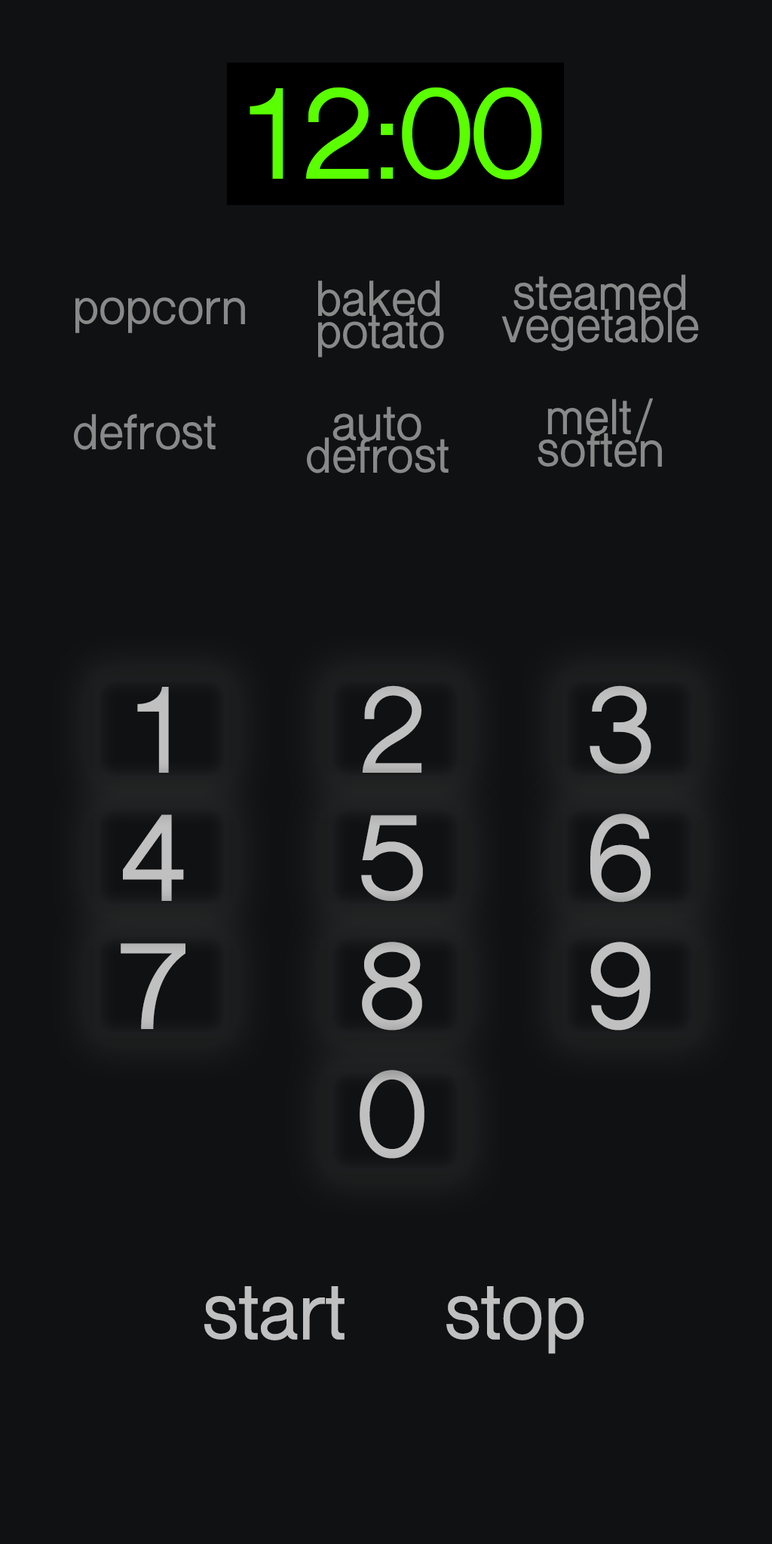
<style>
.page{position:relative;width:772px;height:1544px;background:#0f1112}
.page>*{position:absolute;margin:0}
.t1{font:119.6px "ShreeDev0714-Bold";color:#5aff00}
.t2{font:46.6px/32.5px "ShreeDev0714-Bold";color:#898989}
.t3{font:46.6px "ShreeDev0714-Bold";color:#898989}
.t4{font:113.8px "ShreeDev0714-Bold";color:#c0c0c0}
.t5{font:74.1px "ShreeDev0714-Bold";color:#c0c0c0}
</style>
<div class="page">
<p class="t1" style="left:250px;top:87px;width:292px;height:92px">12:00</p>
<p class="t2" style="left:318px;top:281px;width:126px;height:76px">baked<br>potato</p>
<p class="t2" style="left:501px;top:274px;width:198px;height:77px;text-align:center">steamed<br>vegetable</p>
<p class="t3" style="left:75px;top:297px;width:170px;height:36px">popcorn</p>
<p class="t2" style="left:538px;top:398px;width:124px;height:70px;text-align:center">melt/<br>soften</p>
<p class="t3" style="left:74px;top:414px;width:142px;height:36px">defrost</p>
<p class="t2" style="left:307px;top:406px;width:142px;height:68px;text-align:center">auto<br>defrost</p>
<p class="t4" style="left:137px;top:687px;width:32px;height:86px">1</p>
<p class="t4" style="left:362px;top:685px;width:60px;height:88px">2</p>
<p class="t4" style="left:590px;top:685px;width:62px;height:89px">3</p>
<p class="t4" style="left:123px;top:814px;width:61px;height:87px">4</p>
<p class="t4" style="left:361px;top:815px;width:62px;height:86px">5</p>
<p class="t4" style="left:590px;top:814px;width:61px;height:89px">6</p>
<p class="t4" style="left:362px;top:942px;width:60px;height:89px">8</p>
<p class="t4" style="left:590px;top:942px;width:61px;height:89px">9</p>
<p class="t4" style="left:121px;top:943px;width:64px;height:86px">7</p>
<p class="t4" style="left:360px;top:1070px;width:65px;height:89px">0</p>
<p class="t5" style="left:204px;top:1286px;width:141px;height:55px">start</p>
<p class="t5" style="left:446px;top:1286px;width:138px;height:68px">stop</p>
</div>
